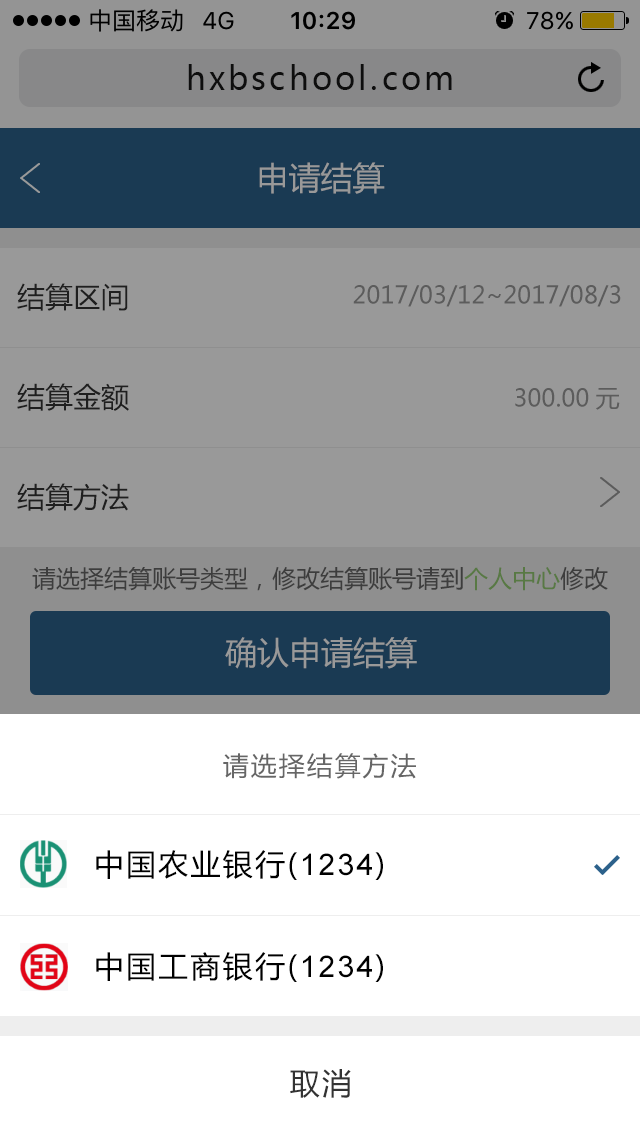
<style>
.page{position:relative;width:640px;height:1136px;background:#ffffff}
.page>*{position:absolute;margin:0}
.t1{font:32px "MicrosoftYaHei";letter-spacing:0.1em;color:#171717}
.t2{font:32px "MicrosoftYaHei";color:#999999}
.t3{font:28px "MicrosoftYaHei";color:#333333}
.t4{font:24px "MicrosoftYaHei";color:#5c5c5c}
.t5{font:24px "MicrosoftYaHei";color:#3d3d3d}
.t6{font:26px "MicrosoftYaHei";letter-spacing:0.075em;color:#666666}
.t7{font:30px "MicrosoftYaHei";letter-spacing:0.075em;color:#000000}
.t8{font:30px "ArialMT";letter-spacing:0.075em;color:#000000}
.t9{font:30px "MicrosoftYaHei";letter-spacing:0.075em;color:#333333}
</style>
<div class="page">
<p class="t1" style="left:188px;top:64px;width:264px;height:26px">hxbschool.com</p>
<p class="t2" style="left:259px;top:162px;width:126px;height:32px">申请结算</p>
<p class="t3" style="left:17px;top:283px;width:111px;height:28px">结算区间</p>
<p class="t4" style="left:353px;top:285px;width:268px;height:22px">2017/03/12~2017/08/3</p>
<p class="t3" style="left:17px;top:383px;width:112px;height:28px">结算金额</p>
<p class="t4" style="left:515px;top:388px;width:105px;height:22px">300.00元</p>
<p class="t3" style="left:17px;top:483px;width:112px;height:28px">结算方法</p>
<p class="t5" style="left:32px;top:566px;width:576px;height:25px">请选择结算账号类型，修改结算账号请到个人中心修改</p>
<p class="t2" style="left:225px;top:637px;width:192px;height:32px">确认申请结算</p>
<p class="t6" style="left:223px;top:753px;width:193px;height:26px">请选择结算方法</p>
<p class="t7" style="left:96px;top:850px;width:287px;height:30px">中国农业银行(<span class="t8">1234</span>)</p>
<p class="t7" style="left:96px;top:952px;width:287px;height:30px">中国工商银行(<span class="t8">1234</span>)</p>
<p class="t9" style="left:290px;top:1069px;width:61px;height:29px">取消</p>
</div>
